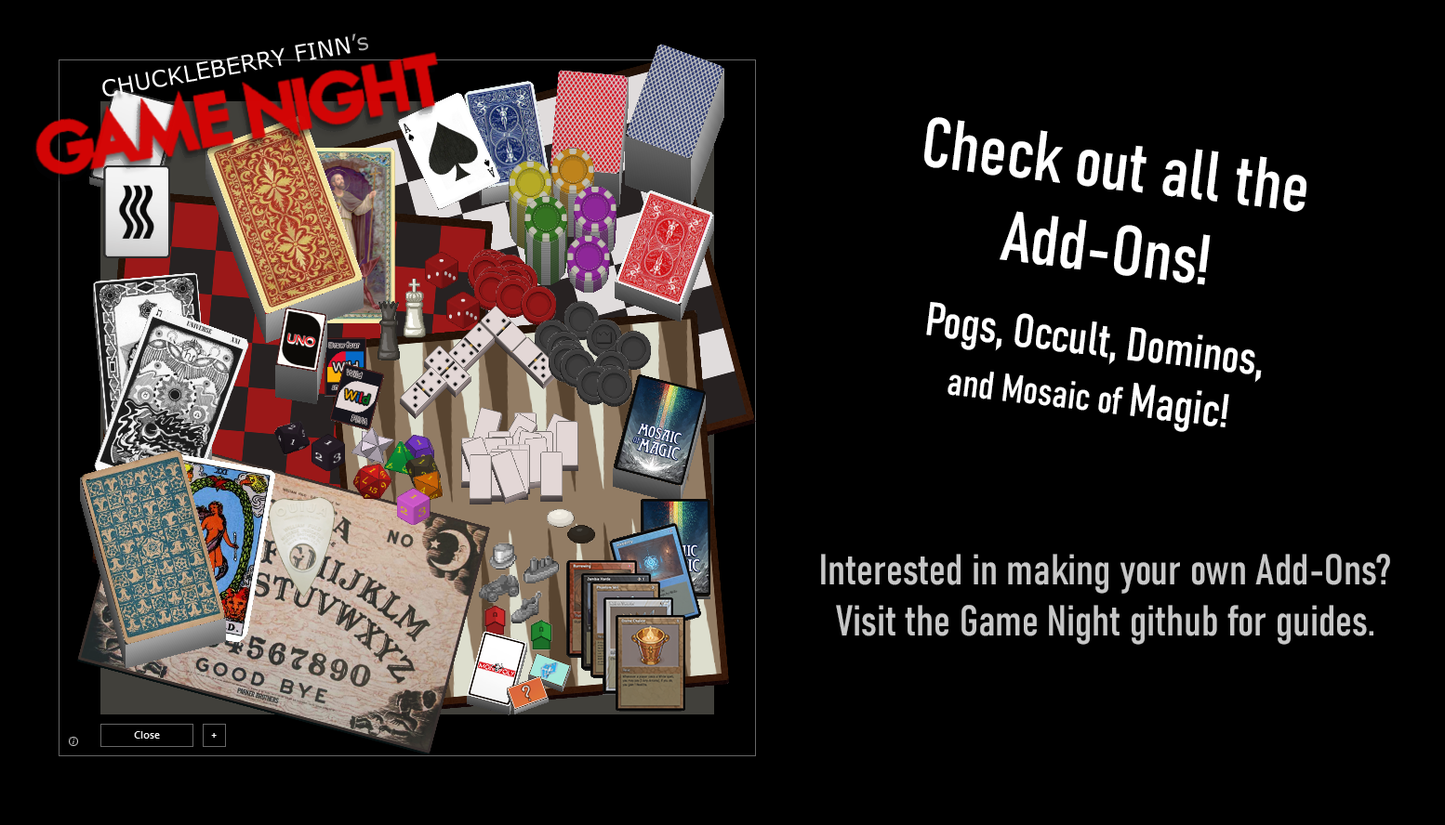
<style>
.page{position:relative;width:1445px;height:825px;background:#000000}
.page>*{position:absolute;margin:0}
.t1{font:23.2px "Verdana";color:#ffffff}
.t2{font:23.2px "Verdana";color:#ababab}
.t3{font:69.7px "Bahnschrift-Condensed";color:#ffffff}
.t4{font:46.5px "Bahnschrift-Condensed";color:#ffffff}
.t5{font:38.7px "Bahnschrift-Condensed";color:#ffffff}
.t6{font:62px "Bahnschrift-Condensed";color:#ffffff}
.t7{font:42.6px "Bahnschrift-Condensed";color:#c7c7c7}
</style>
<div class="page">
<p class="t1" style="left:102px;top:33px;width:266px;height:64px;rotate:-10deg">CHUCKLEBERRY FINN<span class="t2">’s</span></p>
<p class="t3" style="left:924px;top:117px;width:382px;height:315px;text-align:center;rotate:7deg">Check out all the  Add-Ons!<br> <br><span class="t4">Pogs, Occult, Dominos, <br></span><span class="t5">and Mosaic of </span><span class="t4">Magic!<br><br></span><span class="t6">Volumetric Rendering!<br></span><span class="t4">3D items on the UI!</span></p>
<p class="t7" style="left:821px;top:554px;width:569px;height:91px;text-align:center">Interested in making your own Add-Ons?<br>Visit the Game Night github for guides.</p>
</div>
